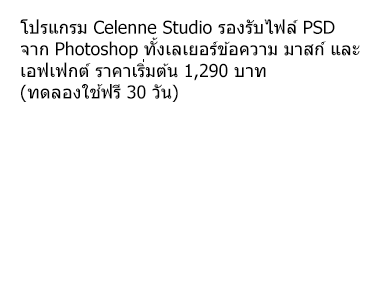
<style>
.page{position:relative;width:380px;height:300px;background:#ffffff}
.page>*{position:absolute;margin:0}
.t1{font:18px "Tahoma";color:#000000}
</style>
<div class="page">
<p class="t1" style="left:20px;top:19px;width:340px;height:83px">โปรแกรม Celenne Studio รองรับไฟล์ PSD จาก Photoshop ทั้งเลเยอร์ข้อความ มาสก์ และเอฟเฟกต์ ราคาเริ่มต้น 1,290 บาท (ทดลองใช้ฟรี 30 วัน)</p>
</div>
